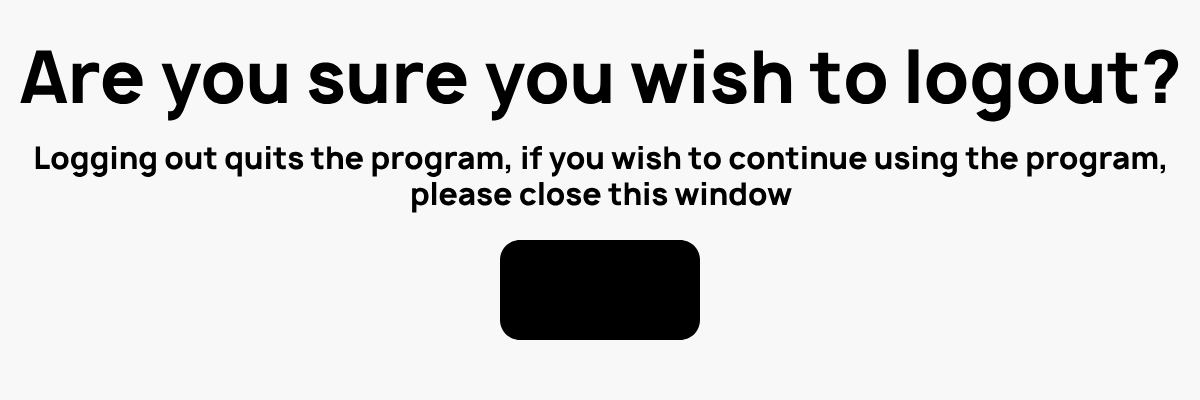
<style>
.page{position:relative;width:1200px;height:400px;background:#f8f8f8}
.page>*{position:absolute;margin:0}
.t1{font:70px "Manrope-Bold";color:#000000}
.t2{font:30px "Manrope-Bold";color:#000000}
</style>
<div class="page">
<p class="t1" style="left:20px;top:49px;width:1159px;height:73px">Are you sure you wish to logout?</p>
<p class="t2" style="left:35px;top:145px;width:1130px;height:68px;text-align:center">Logging out quits the program, if you wish to continue using the program,<br>please close this window</p>
</div>
